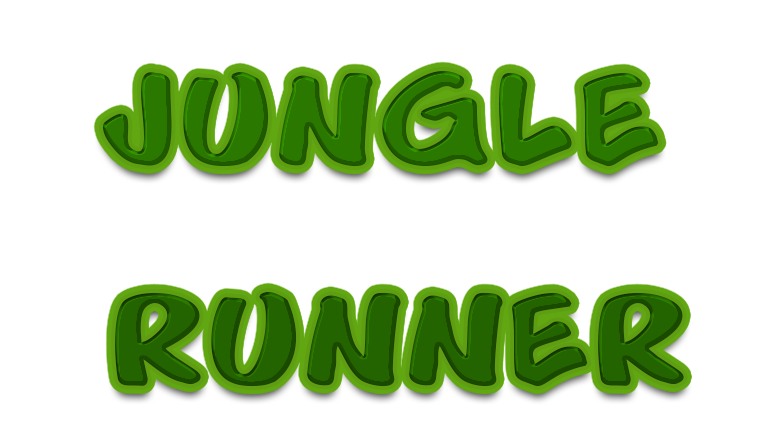
<style>
.page{position:relative;width:770px;height:445px;background:#ffffff}
.page>*{position:absolute;margin:0}
.t1{font:150px/48px "Cartoon";letter-spacing:0.01em;color:#236400;text-transform:uppercase;font-weight:bold}
</style>
<div class="page">
<p class="t1" style="left:102px;top:70px;width:582px;height:317px;text-align:center">Jungle <br><br><br><br>runner</p>
</div>
